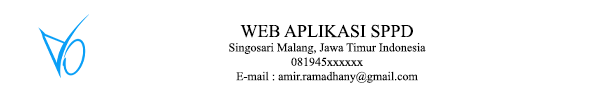
<style>
.page{position:relative;width:600px;height:100px;background:#ffffff}
.page>*{position:absolute;margin:0}
.t1{font:12px "TimesNewRomanPSMT";color:#000000}
.t2{font:18px "TimesNewRomanPSMT";color:#000000}
</style>
<div class="page">
<p class="t1" style="left:229px;top:24px;width:197px;height:59px;text-align:center"><span class="t2">WEB APLIKASI SPPD<br></span>Singosari Malang, Jawa Timur Indonesia<br>081945xxxxxx<br>E-mail : amir.ramadhany@gmail.com</p>
</div>
